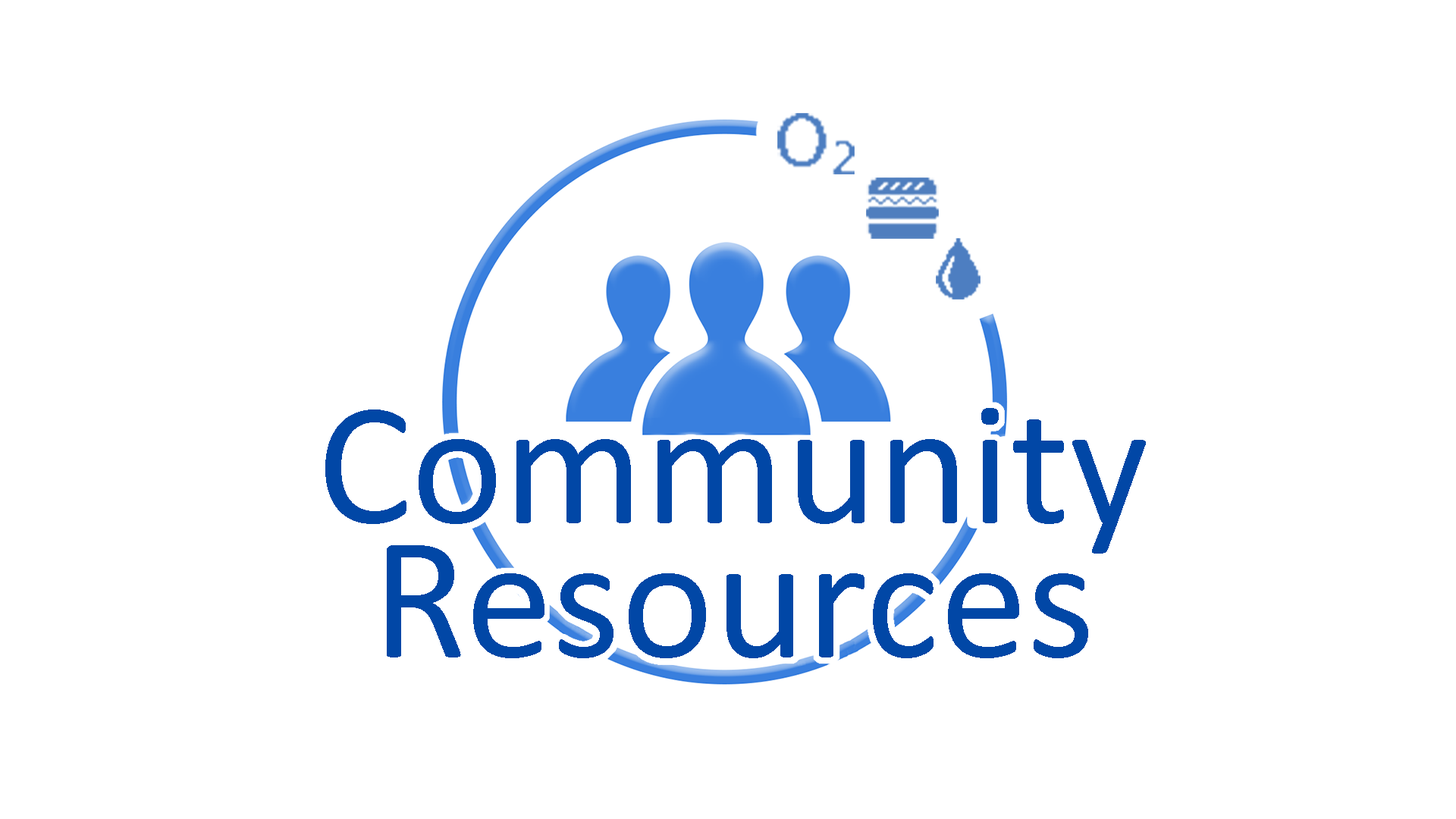
<style>
.page{position:relative;width:1456px;height:819px;background:#ffffff}
.page>*{position:absolute;margin:0}
.t1{font:175.9px "Calibri";color:#0147a6}
</style>
<div class="page">
<p class="t1" style="left:325px;top:408px;width:821px;height:146px">Community</p>
<p class="t1" style="left:387px;top:545px;width:701px;height:113px">Resources</p>
</div>
